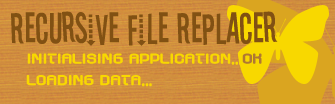
<style>
.page{position:relative;width:335px;height:104px}
.page>*{position:absolute;margin:0}
.t1{font:48px "Stereofidelic";color:#815113}
.t2{font:18px "Axaxaxregular";color:#f8d800}
.t3{font:18px "Axaxaxregular";color:#b07832}
</style>
<div class="page">
<p class="t1" style="left:11px;top:11px;width:267px;height:35px">Recursive File Replacer</p>
<p class="t2" style="left:26px;top:53px;width:236px;height:34px">INITIALISING APPLICATION...<span class="t3">OK<br></span>LOADING DATA...</p>
</div>
